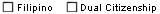
<style>
.page{position:relative;width:160px;height:14px;background:#ffffff}
.page>*{position:absolute;margin:0}
.t1{font:10px "ArialMT";color:#000000}
</style>
<div class="page">
<p class="t1" style="left:18px;top:4px;width:34px;height:9px">Filipino</p>
<p class="t1" style="left:81px;top:4px;width:75px;height:9px">Dual Citizenship</p>
</div>
